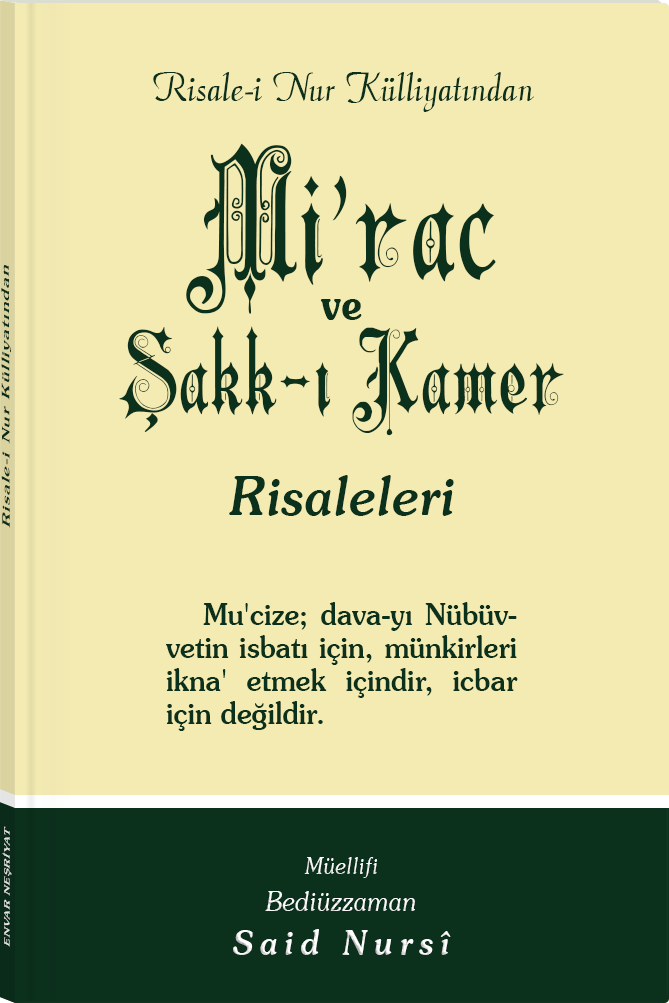
<style>
.page{position:relative;width:669px;height:1003px;background:#f3ebb2}
.page>*{position:absolute;margin:0}
.t1{font:45.3px "Barla © 072 Aria ScriptScriptSSi";color:#0b301c;scale:0.94 1}
.t2{font:115.2px/92.4px "Barla © 001 Liva Nur";letter-spacing:-0.001em;color:#0b301c;scale:0.93 1}
.t3{font:174.1px/102.8px "Barla © 001 Liva Nur";letter-spacing:-0.001em;color:#0b301c;scale:0.93 1}
.t4{font:42.5px/42px "SouvenirITCbyBT-Demi";letter-spacing:-0.001em;color:#0b301c;scale:0.93 1}
.t5{font:53.4px/102.8px "Souvenir-MediumItalic";letter-spacing:-0.001em;color:#0b301c;scale:0.93 1}
.t6{font:11.4px "Souvenir-Medium";letter-spacing:0.08em;color:#0b301c;scale:1.65 1}
.t7{font:30.3px/33px "Souvenir-Medium";color:#0b301c;scale:0.92 1}
.t8{font:8.3px "Souvenir-Medium";letter-spacing:0.08em;color:#e5e5e5;scale:1.43 1}
.t9{font:27.1px/37.8px "Souvenir-LightItalic";color:#ffffff;scale:0.92 1}
.t10{font:22.8px/39.8px "Souvenir-LightItalic";color:#ffffff;scale:0.92 1}
.t11{font:33.9px/43.8px "Souvenir-MediumItalic";letter-spacing:0.2em;color:#ffffff;scale:0.92 1}
</style>
<div class="page">
<p class="t1" style="left:153px;top:72px;width:381px;height:40px">Risale-i Nur Külliyatından</p>
<p class="t2" style="left:119px;top:143px;width:445px;height:373px;text-align:center"><span class="t3">Mi’rac<br></span><span class="t4">ve<br></span>Şakk-ı Kamer<br><span class="t5">Risaleleri</span></p>
<p class="t6" style="left:1px;top:265px;width:10px;height:263px;rotate:-90deg">Risale-i Nur Külliyatından</p>
<p class="t7" style="left:166px;top:602px;width:352px;height:129px;text-align:justify">Mu'cize; dava-yı Nübüvvetin isbatı için, münkirleri ikna' etmek içindir, icbar için değildir.</p>
<p class="t8" style="left:2px;top:826px;width:10px;height:121px;rotate:-90deg">ENVAR NEŞRİYAT</p>
<p class="t9" style="left:233px;top:857px;width:218px;height:98px;text-align:center"><span class="t10">Müellifi<br></span>Bediüzzaman<br><span class="t11">Said Nursî</span></p>
</div>
